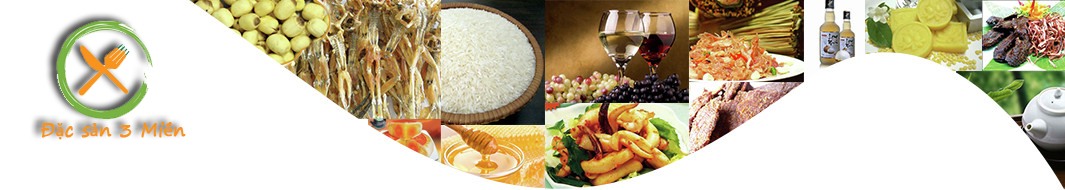
<style>
.page{position:relative;width:1065px;height:190px;background:#ffffff}
.page>*{position:absolute;margin:0}
.t1{font:18px "SegoePrint";color:#f7941d;font-weight:bold}
.t2{font:18px "MyriadPro-Regular";color:#f7941d;font-weight:bold}
</style>
<div class="page">
<p class="t1" style="left:41px;top:122px;width:145px;height:18px">Đ<span class="t2">ặ</span>c s<span class="t2">ả</span>n 3 Mi<span class="t2">ề</span>n</p>
</div>
